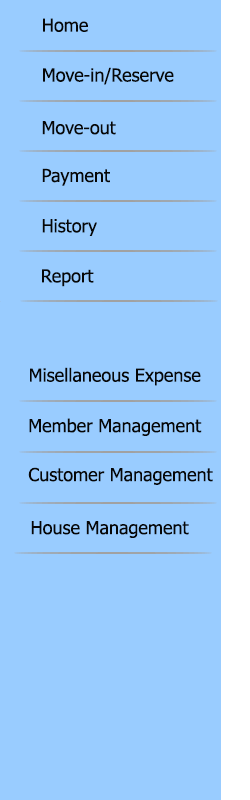
<style>
.page{position:relative;width:250px;height:800px;background:#99ccff}
.page>*{position:absolute;margin:0}
.t1{font:18px "Tahoma";color:#070707}
</style>
<div class="page">
<p class="t1" style="left:43px;top:18px;width:45px;height:14px">Home</p>
<p class="t1" style="left:43px;top:67px;width:131px;height:18px">Move-in/Reserve</p>
<p class="t1" style="left:42px;top:121px;width:74px;height:14px">Move-out</p>
<p class="t1" style="left:42px;top:168px;width:68px;height:18px">Payment</p>
<p class="t1" style="left:42px;top:219px;width:55px;height:17px">History</p>
<p class="t1" style="left:42px;top:269px;width:52px;height:18px">Report</p>
<p class="t1" style="left:30px;top:367px;width:171px;height:19px">Misellaneous Expense</p>
<p class="t1" style="left:29px;top:418px;width:173px;height:18px">Member Management</p>
<p class="t1" style="left:28px;top:467px;width:185px;height:18px">Customer Management</p>
<p class="t1" style="left:31px;top:521px;width:158px;height:17px">House Management</p>
</div>
